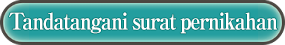
<style>
.page{position:relative;width:285px;height:45px}
.page>*{position:absolute;margin:0}
.t1{font:23px "RyuminPro-ExBold";letter-spacing:-0.08em;color:#ffffff;scale:0.9 1}
</style>
<div class="page">
<p class="t1" style="left:9px;top:12px;width:269px;height:22px">Tandatangani surat pernikahan</p>
</div>
